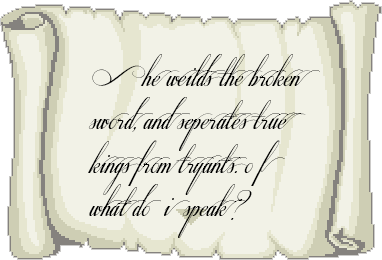
<style>
.page{position:relative;width:382px;height:260px;background:#f2f2e7}
.page>*{position:absolute;margin:0}
.t1{font:36px "RespectiveSwashesSlanted";color:#000000}
</style>
<div class="page">
<p class="t1" style="left:88px;top:54px;width:232px;height:184px">She weilds the broken<br>sword, and seperates true <br>kings from tryants. o f what do  i  speak ?</p>
</div>
